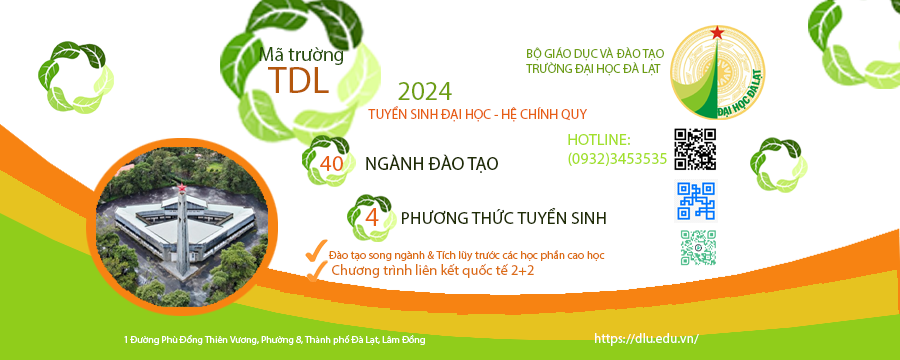
<style>
.page{position:relative;width:900px;height:360px;background:#ffffff}
.page>*{position:absolute;margin:0}
.t1{font:19.7px "MyriadPro-Regular";color:#254d08}
.t2{font:12.5px "MyriadPro-Regular";color:#6e9e12}
.t3{font:37.5px "MyriadPro-Regular";color:#b4570c}
.t4{font:26.8px "MyriadPro-Regular";color:#6e9e12}
.t5{font:13.7px "MyriadPro-Regular";color:#e75f15}
.t6{font:16.1px "MyriadPro-Regular";color:#a3e02c}
.t7{font:23px "MyriadPro-Regular";color:#e75f15}
.t8{font:18.5px "MyriadPro-Regular";color:#202d05}
.t9{font:27.6px "MyriadPro-Regular";color:#e75f15}
.t10{font:17.7px "MyriadPro-Regular";color:#202d05}
.t11{font:11.4px "MyriadPro-Regular";color:#dc6e15}
.t12{font:14.5px "MyriadPro-Regular";color:#dc6e15}
.t13{font:9.9px "MyriadPro-Regular";color:#ffffff}
.t14{font:13.4px "MyriadPro-Regular";color:#ffffff}
</style>
<div class="page">
<p class="t1" style="left:259px;top:47px;width:84px;height:18px">Mã trường</p>
<p class="t2" style="left:526px;top:47px;width:138px;height:29px">BỘ GIÁO DỤC VÀ ĐÀO TẠO<br>TRƯỜNG ĐẠI HỌC ĐÀ LẠT</p>
<p class="t3" style="left:268px;top:67px;width:61px;height:26px">TDL</p>
<p class="t4" style="left:398px;top:82px;width:54px;height:18px">2024</p>
<p class="t5" style="left:368px;top:106px;width:219px;height:16px">TUYỂN SINH ĐẠI HỌC - HỆ CHÍNH QUY</p>
<p class="t6" style="left:568px;top:134px;width:99px;height:32px">HOTLINE:<br>(0932)3453535</p>
<p class="t7" style="left:320px;top:156px;width:23px;height:15px">40</p>
<p class="t8" style="left:366px;top:154px;width:132px;height:19px">NGÀNH ĐÀO TẠO</p>
<p class="t9" style="left:365px;top:208px;width:14px;height:18px">4</p>
<p class="t10" style="left:402px;top:207px;width:204px;height:17px">PHƯƠNG THỨC TUYỂN SINH</p>
<p class="t11" style="left:328px;top:250px;width:277px;height:12px">Đào tạo song ngành &amp; Tích lũy trước các học phần cao học</p>
<p class="t12" style="left:332px;top:263px;width:202px;height:15px">Chương trình liên kết quốc tế 2+2</p>
<p class="t13" style="left:124px;top:335px;width:301px;height:10px">1 Đường Phù Đổng Thiên Vương, Phường 8, Thành phố Đà Lạt, Lâm Đồng</p>
<p class="t14" style="left:595px;top:333px;width:104px;height:13px">https://dlu.edu.vn/</p>
</div>
